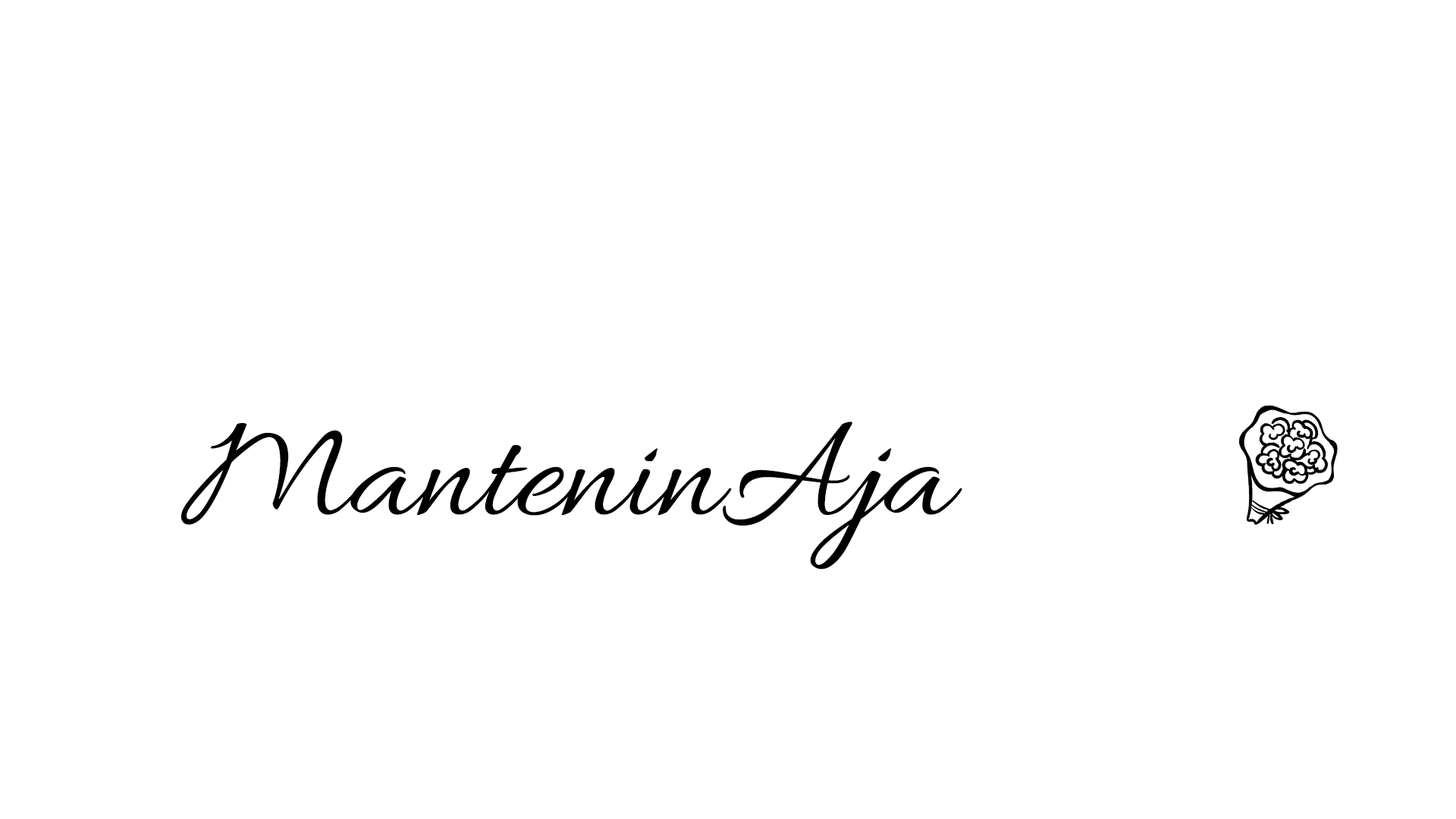
<style>
.page{position:relative;width:1456px;height:819px;background:#ffffff}
.page>*{position:absolute;margin:0}
.t1{font:151.7px "Allura-Regular";color:#000000}
</style>
<div class="page">
<p class="t1" style="left:181px;top:422px;width:781px;height:148px">ManteninAja</p>
</div>
